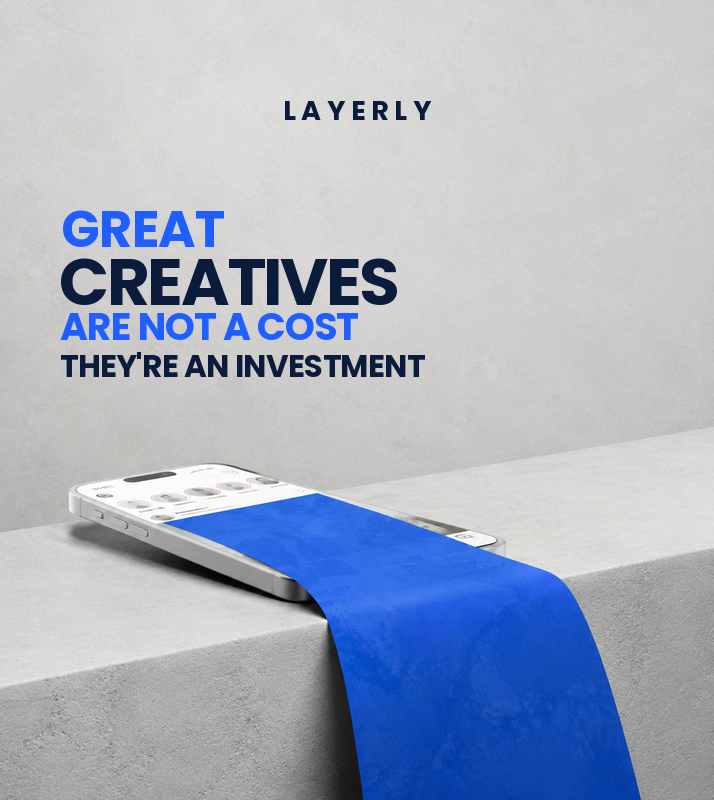
<style>
.page{position:relative;width:714px;height:800px}
.page>*{position:absolute;margin:0}
.t1{font:27px "Poppins-Bold";letter-spacing:0.21em;color:#0b1b3a}
.t2{font:51px "Poppins-Bold";letter-spacing:-0.015em;color:#1f5eff}
.t3{font:66px "Poppins-Bold";letter-spacing:-0.038em;color:#0b1b3a}
.t4{font:38px "Poppins-Bold";letter-spacing:-0.025em;color:#1f5eff}
.t5{font:31px "Poppins-Bold";letter-spacing:-0.02em;color:#0b1b3a}
</style>
<div class="page">
<p class="t1" style="left:285px;top:101px;width:147px;height:19px">LAYERLY</p>
<p class="t2" style="left:63px;top:210px;width:161px;height:37px">GREAT</p>
<p class="t3" style="left:61px;top:258px;width:336px;height:47px">CREATIVES</p>
<p class="t4" style="left:60px;top:313px;width:298px;height:27px">ARE NOT A COST</p>
<p class="t5" style="left:61px;top:352px;width:364px;height:25px">THEY'RE AN INVESTMENT</p>
</div>
